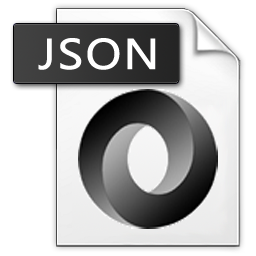
<style>
.page{position:relative;width:256px;height:256px;background:#ffffff}
.page>*{position:absolute;margin:0}
.t1{font:40px "MicrosoftYaHei";letter-spacing:0.025em;color:#ffffff;font-weight:bold;scale:1.1 1}
</style>
<div class="page">
<p class="t1" style="left:38px;top:38px;width:118px;height:32px">JSON</p>
</div>
